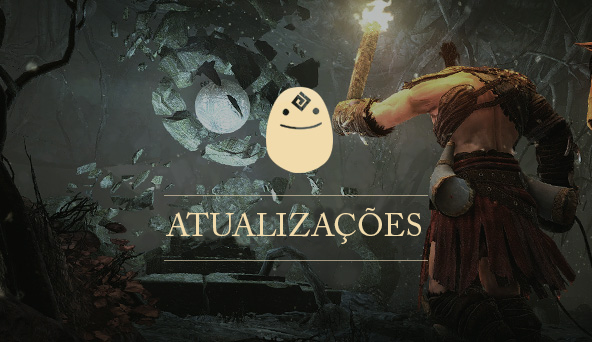
<style>
.page{position:relative;width:592px;height:342px}
.page>*{position:absolute;margin:0}
.t1{font:32px "ACaslonPro-Regular";color:#f1dbac}
</style>
<div class="page">
<p class="t1" style="left:166px;top:207px;width:255px;height:37px">ATUALIZAÇÕES</p>
</div>
